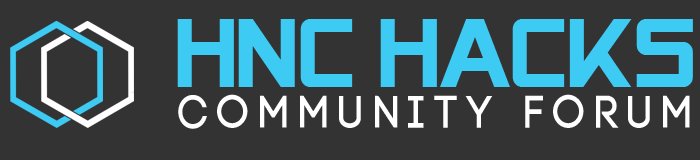
<style>
.page{position:relative;width:700px;height:160px;background:#333333}
.page>*{position:absolute;margin:0}
.t1{font:95.1px "AlienEncountersSolid";color:#3dcbf4}
.t2{font:47px "Code-Bold";letter-spacing:0.21em;color:#ffffff;scale:0.91 1}
</style>
<div class="page">
<p class="t1" style="left:177px;top:19px;width:516px;height:68px">HNC HAcks</p>
<p class="t2" style="left:178px;top:94px;width:512px;height:35px">Community forum</p>
</div>
